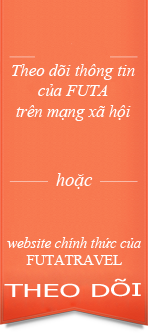
<style>
.page{position:relative;width:148px;height:333px}
.page>*{position:absolute;margin:0}
.t1{font:16.9px "TimesNewRomanPS-ItalicMT";color:#fefefe}
.t2{font:18.9px "TimesNewRomanPS-ItalicMT";color:#fefefe}
.t3{font:14.6px "TimesNewRomanPS-ItalicMT";color:#fefefe}
.t4{font:14.6px "TimesNewRomanPSMT";color:#fefefe}
.t5{font:18px "Tahoma";color:#ffffff;scale:1.66 1}
</style>
<div class="page">
<p class="t1" style="left:12px;top:64px;width:123px;height:57px;text-align:center">Theo dõi thông tin<br>của FUTA<br>trên mạng xã hội</p>
<p class="t2" style="left:56px;top:173px;width:37px;height:16px">hoặc</p>
<p class="t3" style="left:7px;top:237px;width:134px;height:28px;text-align:center">website chính thức của<br><span class="t4">FUTATRAVEL</span></p>
<p class="t5" style="left:4px;top:278px;width:137px;height:20px">THEO DÕI</p>
</div>
